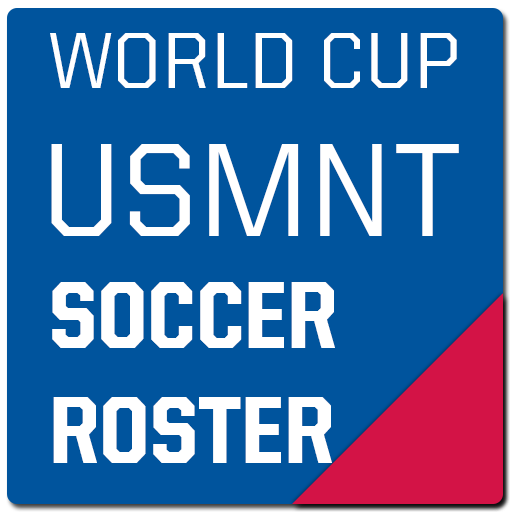
<style>
.page{position:relative;width:512px;height:512px;background:#00549d}
.page>*{position:absolute;margin:0}
.t1{font:80px "UnitedSansReg-Medium";color:#ffffff}
.t2{font:133.2px "UnitedSansReg-Medium";color:#ffffff}
.t3{font:95.8px "UnitedSansSemiCond-Heavy";color:#ffffff}
</style>
<div class="page">
<p class="t1" style="left:50px;top:33px;width:407px;height:55px">WORLD CUP</p>
<p class="t2" style="left:51px;top:144px;width:408px;height:92px">USMNT</p>
<p class="t3" style="left:52px;top:282px;width:283px;height:181px">SOCCER<br>ROSTER</p>
</div>
